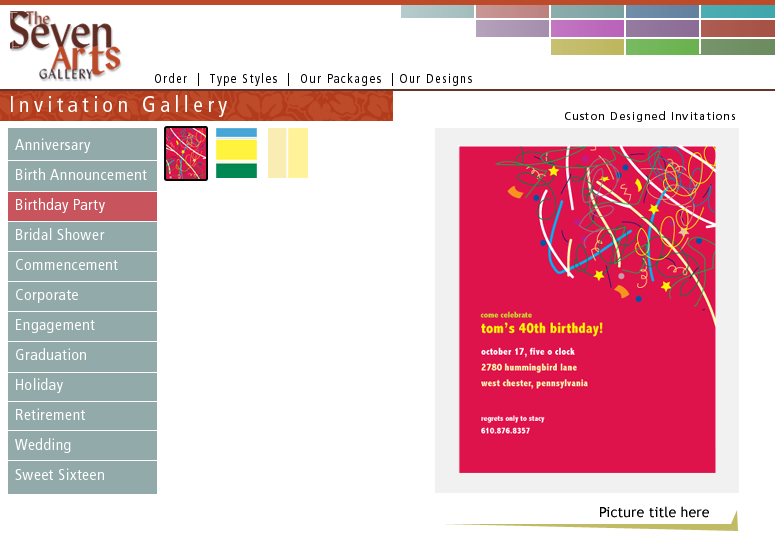
<style>
.page{position:relative;width:775px;height:550px;background:#ffffff}
.page>*{position:absolute;margin:0}
.t1{font:13px "Frutiger-Cn";letter-spacing:0.1em;color:#000000}
.t2{font:22px "Frutiger-Cn";letter-spacing:0.2em;color:#ffffff}
.t3{font:11px "Frutiger-Roman";letter-spacing:0.1em;color:#000000}
.t4{font:16px/30px "Frutiger-Cn";letter-spacing:0.025em;color:#ffffff}
.t5{font:14px "TrebuchetMS";letter-spacing:0.01em;color:#000000}
</style>
<div class="page">
<p class="t1" style="left:155px;top:73px;width:317px;height:13px">Order  |  Type Styles  |  Our Packages  | Our Designs</p>
<p class="t2" style="left:11px;top:95px;width:216px;height:22px">Invitation Gallery</p>
<p class="t3" style="left:565px;top:111px;width:170px;height:11px">Custon Designed Invitations</p>
<p class="t4" style="left:15px;top:138px;width:132px;height:342px">Anniversary<br>Birth Announcement<br>Birthday Party<br>Bridal Shower<br>Commencement<br>Corporate<br>Engagement<br>Graduation<br>Holiday<br>Retirement<br>Wedding<br>Sweet Sixteen</p>
<p class="t5" style="left:600px;top:506px;width:109px;height:12px">Picture title here</p>
</div>
